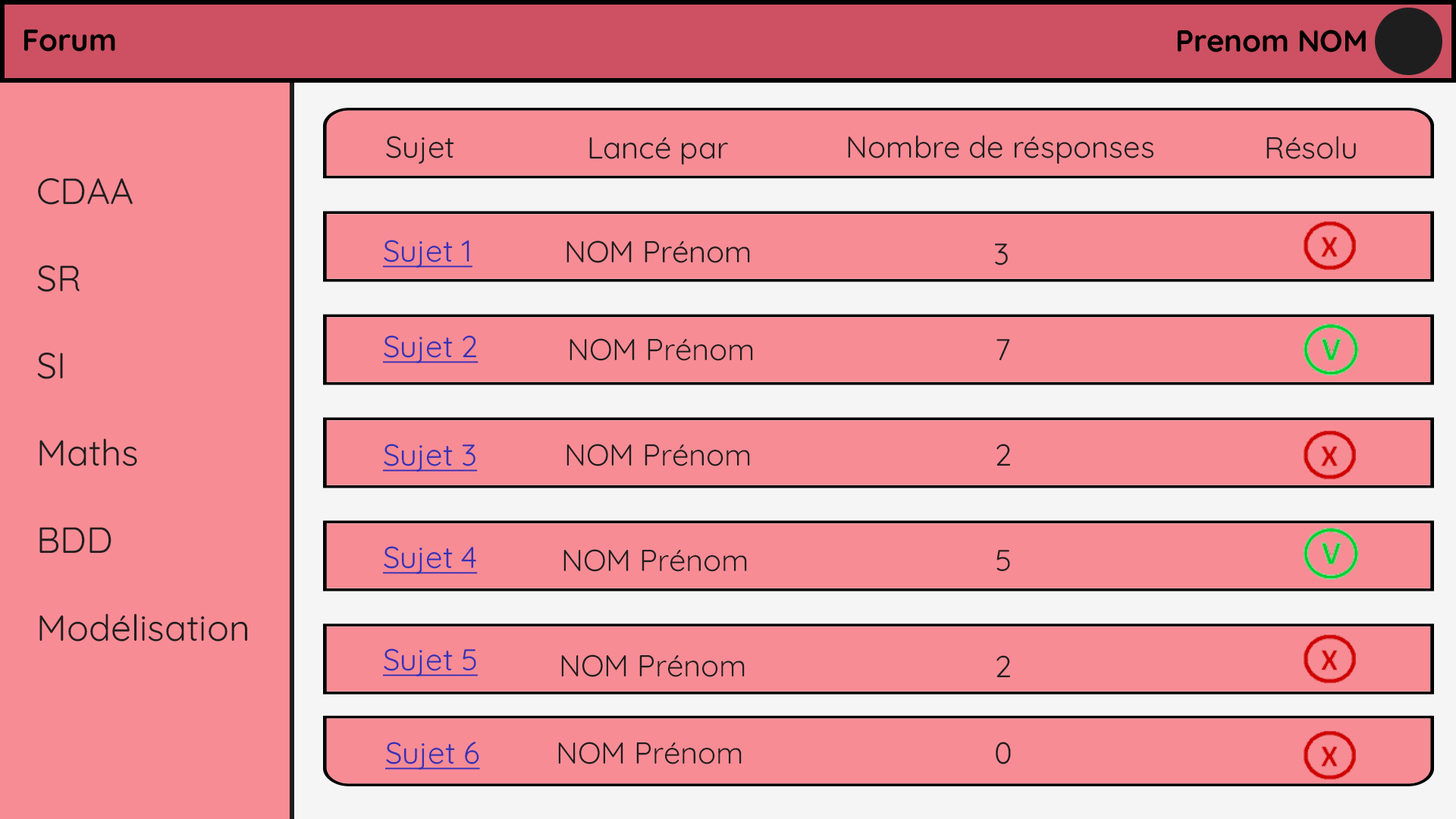
<style>
.page{position:relative;width:1456px;height:819px;background:#f88c95}
.page>*{position:absolute;margin:0}
.t1{font:30.3px "Quicksand-Regular";color:#1f1e1f}
.t2{font:36.4px "Quicksand-Regular";color:#1f1e1f}
.t3{font:30.3px "Quicksand-Regular";color:#3532b5;text-decoration:underline}
</style>
<div class="page">
<p class="t1" style="left:386px;top:136px;width:68px;height:28px">Sujet</p>
<p class="t1" style="left:589px;top:136px;width:139px;height:29px">Lancé par</p>
<p class="t1" style="left:848px;top:135px;width:306px;height:30px">Nombre de résponses</p>
<p class="t1" style="left:1266px;top:136px;width:90px;height:23px">Résolu</p>
<p class="t2" style="left:37px;top:177px;width:211px;height:465px">CDAA<br><br>SR<br><br>SI<br><br>Maths<br><br>BDD<br><br>Modélisation</p>
<p class="t3" style="left:383px;top:240px;width:89px;height:28px">Sujet 1</p>
<p class="t1" style="left:566px;top:240px;width:184px;height:23px">NOM Prénom</p>
<p class="t1" style="left:994px;top:243px;width:14px;height:22px">3</p>
<p class="t3" style="left:383px;top:335px;width:96px;height:28px">Sujet 2</p>
<p class="t1" style="left:570px;top:338px;width:183px;height:23px">NOM Prénom</p>
<p class="t1" style="left:996px;top:339px;width:14px;height:21px">7</p>
<p class="t3" style="left:383px;top:444px;width:95px;height:28px">Sujet 3</p>
<p class="t1" style="left:566px;top:444px;width:184px;height:22px">NOM Prénom</p>
<p class="t1" style="left:996px;top:444px;width:15px;height:22px">2</p>
<p class="t3" style="left:383px;top:546px;width:95px;height:28px">Sujet 4</p>
<p class="t1" style="left:563px;top:549px;width:184px;height:23px">NOM Prénom</p>
<p class="t1" style="left:996px;top:550px;width:14px;height:22px">5</p>
<p class="t3" style="left:383px;top:648px;width:95px;height:28px">Sujet 5</p>
<p class="t1" style="left:561px;top:654px;width:184px;height:23px">NOM Prénom</p>
<p class="t1" style="left:996px;top:655px;width:15px;height:23px">2</p>
<p class="t3" style="left:385px;top:742px;width:95px;height:28px">Sujet 6</p>
<p class="t1" style="left:558px;top:742px;width:184px;height:22px">NOM Prénom</p>
<p class="t1" style="left:996px;top:742px;width:15px;height:22px">0</p>
</div>
